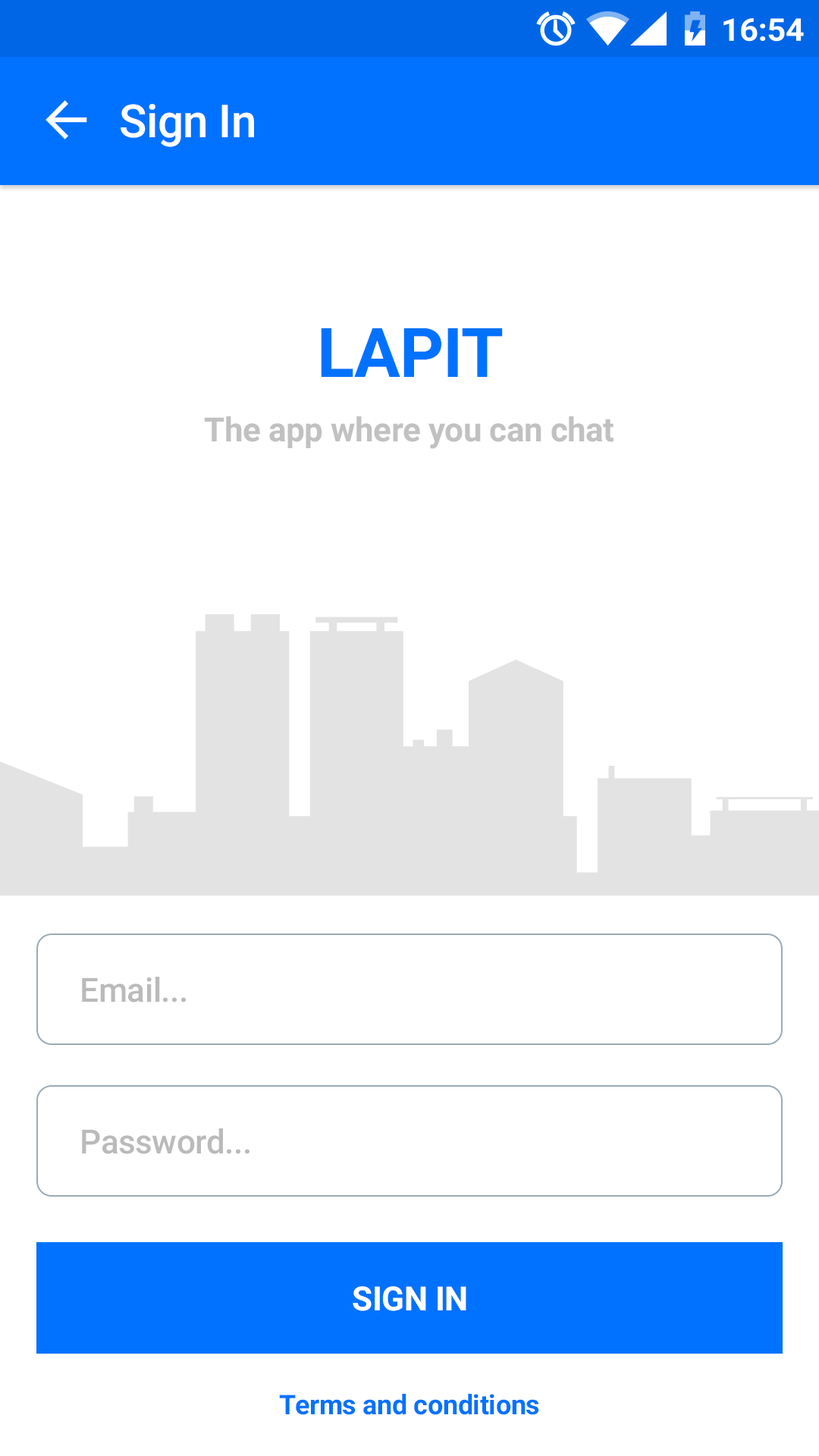
<style>
.page{position:relative;width:819px;height:1456px;background:#ffffff}
.page>*{position:absolute;margin:0}
.t1{font:45.8px "Roboto-Medium";letter-spacing:-0.01em;color:#ffffff}
.t2{font:68.6px "Roboto-Bold";letter-spacing:-0.01em;color:#0172ff}
.t3{font:33.4px "Roboto-Bold";letter-spacing:-0.01em;color:#c1c1c1}
.t4{font:33.4px "Roboto-Medium";letter-spacing:-0.01em;color:#bababa}
.t5{font:33.4px "Roboto-Bold";letter-spacing:-0.01em;color:#ffffff}
.t6{font:27.3px "Roboto-Bold";letter-spacing:-0.01em;color:#0172ff}
</style>
<div class="page">
<p class="t1" style="left:121px;top:104px;width:133px;height:43px">Sign In</p>
<p class="t2" style="left:321px;top:328px;width:182px;height:49px">LAPIT</p>
<p class="t3" style="left:204px;top:416px;width:409px;height:33px">The app where you can chat</p>
<p class="t4" style="left:82px;top:977px;width:104px;height:26px">Email...</p>
<p class="t4" style="left:82px;top:1128px;width:167px;height:26px">Password...</p>
<p class="t5" style="left:353px;top:1286px;width:113px;height:25px">SIGN IN</p>
<p class="t6" style="left:279px;top:1394px;width:260px;height:21px">Terms and conditions</p>
</div>
